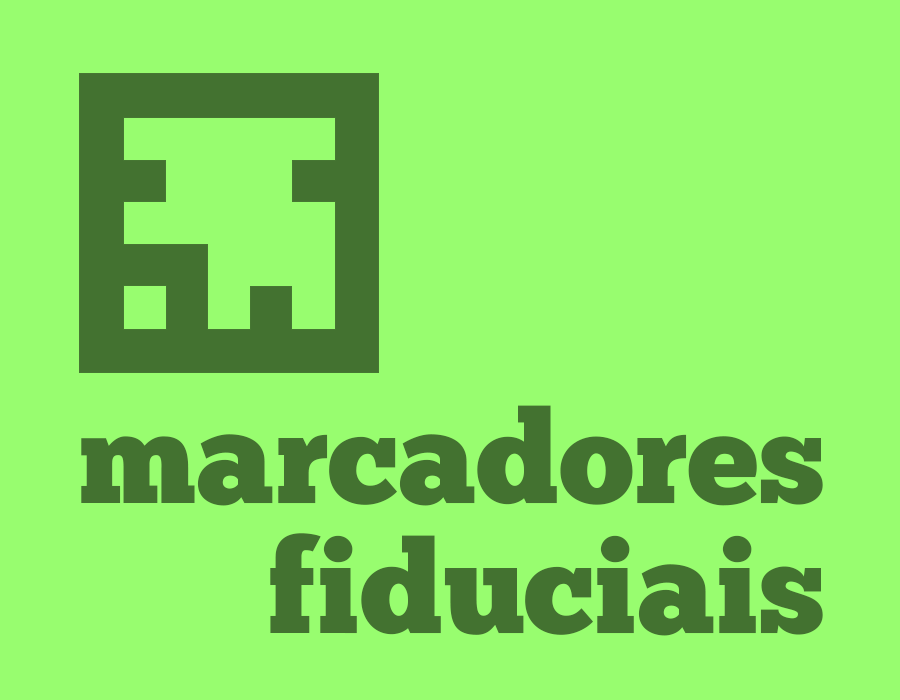
<style>
.page{position:relative;width:900px;height:700px;background:#98fd6f}
.page>*{position:absolute;margin:0}
.t1{font:129.9px/129.9px "ChunkFive-Roman";color:#437230}
</style>
<div class="page">
<p class="t1" style="left:81px;top:405px;width:742px;height:231px;text-align:right">marcadores<br>fiduciais</p>
</div>
